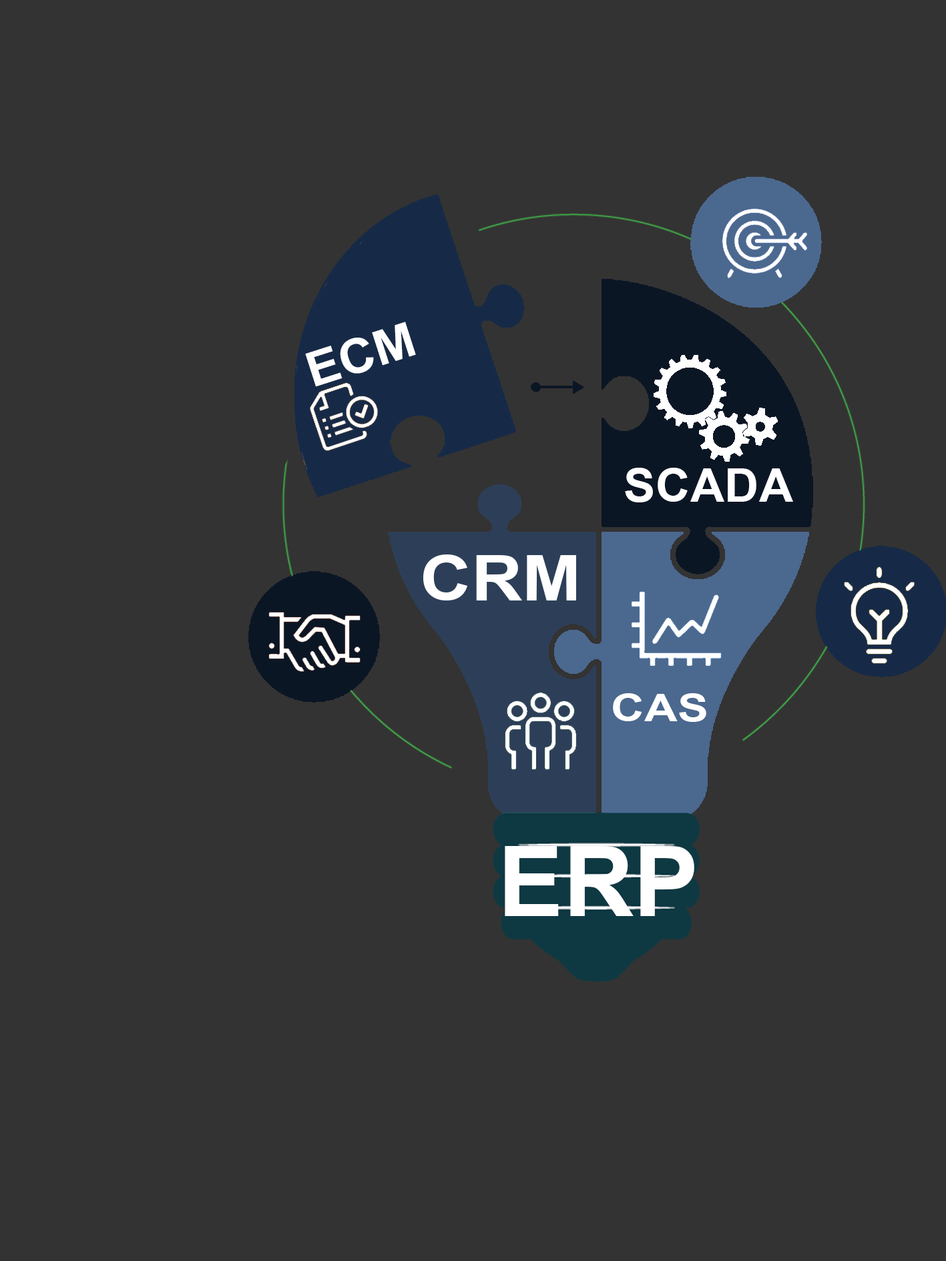
<style>
.page{position:relative;width:946px;height:1261px;background:#333333}
.page>*{position:absolute;margin:0}
.t1{font:47.9px "Arial-BoldMT";color:#ffffff;scale:1.05 1}
.t2{font:47px "Arial-BoldMT";color:#ffffff}
.t3{font:38.3px "Arial-BoldMT";color:#ffffff;scale:1.21 1}
.t4{font:97.3px "Arial-BoldMT";color:#ffffff}
</style>
<div class="page">
<p class="t1" style="left:305px;top:322px;width:111px;height:65px;rotate:-18deg">ECM</p>
<p class="t2" style="left:625px;top:468px;width:168px;height:34px">SCADA</p>
<p class="t3" style="left:613px;top:693px;width:93px;height:29px">CAS</p>
<p class="t4" style="left:504px;top:846px;width:190px;height:70px">ERP</p>
</div>
